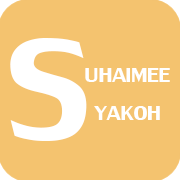
<style>
.page{position:relative;width:180px;height:180px;background:#f4c36f}
.page>*{position:absolute;margin:0}
.t1{font:215.7px "LilyUPC";color:#ffffff}
.t2{font:31.4px "LilyUPC";color:#ffffff}
</style>
<div class="page">
<p class="t1" style="left:10px;top:38px;width:77px;height:103px">S</p>
<p class="t2" style="left:85px;top:68px;width:85px;height:52px;text-align:center">UHAIMEE<br>YAKOH</p>
</div>
